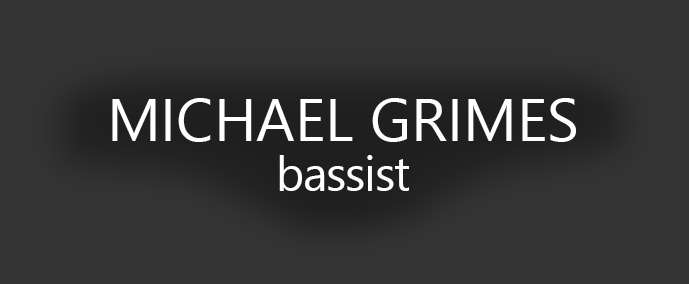
<style>
.page{position:relative;width:689px;height:284px;background:#333333}
.page>*{position:absolute;margin:0}
.t1{font:60px "SegoeUI";color:#ffffff}
.t2{font:48px "SegoeUI";letter-spacing:-0.025em;color:#ffffff}
</style>
<div class="page">
<p class="t1" style="left:112px;top:98px;width:464px;height:44px">MICHAEL GRIMES</p>
<p class="t2" style="left:279px;top:155px;width:130px;height:36px">bassist</p>
</div>
